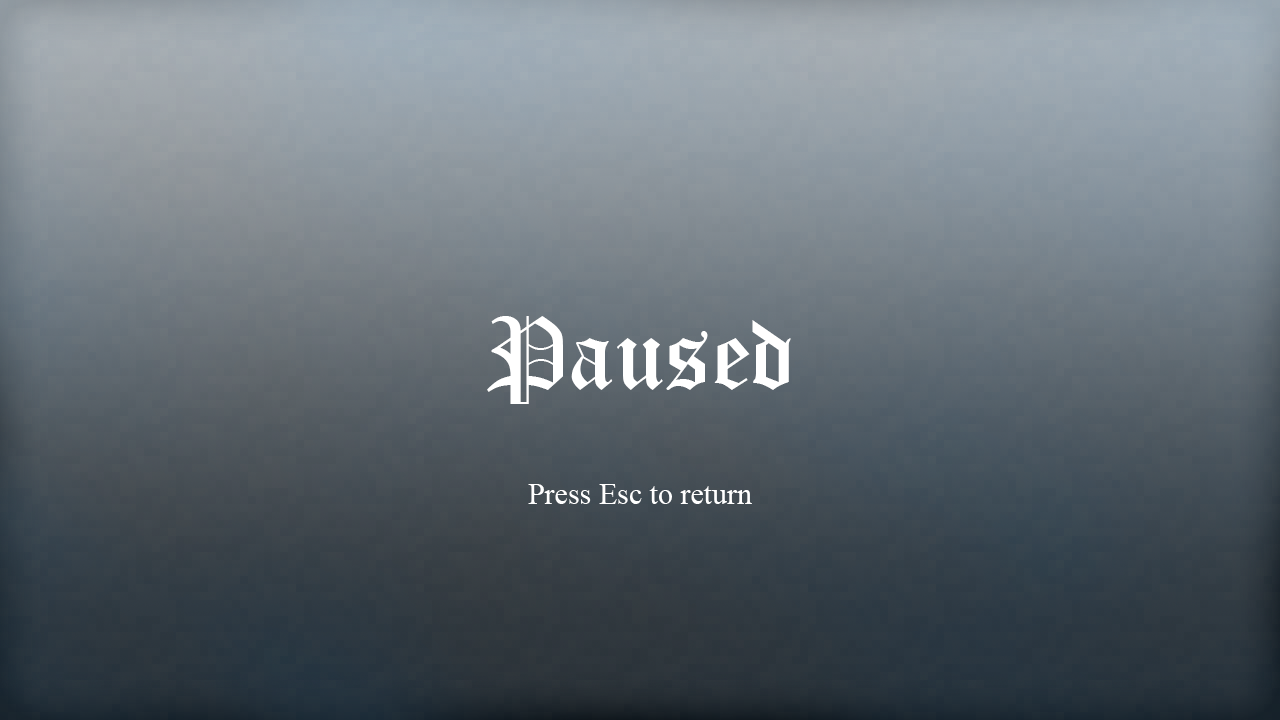
<style>
.page{position:relative;width:1280px;height:720px}
.page>*{position:absolute;margin:0}
.t1{font:100px "OldEnglishTextMT";color:#ffffff}
.t2{font:30px "TimesNewRomanPSMT";color:#ffffff}
</style>
<div class="page">
<p class="t1" style="left:487px;top:316px;width:304px;height:88px">Paused</p>
<p class="t2" style="left:528px;top:484px;width:224px;height:20px">Press Esc to return</p>
</div>
